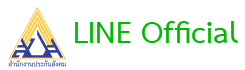
<style>
.page{position:relative;width:245px;height:70px;background:#ffffff}
.page>*{position:absolute;margin:0}
.t1{font:43px "THSarabunNew-Bold";color:#00b900}
</style>
<div class="page">
<p class="t1" style="left:75px;top:21px;width:163px;height:22px">LINE Official</p>
</div>
